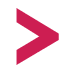
<style>
.page{position:relative;width:73px;height:73px;background:#ffffff}
.page>*{position:absolute;margin:0}
.t1{font:100px "Raleway-Bold";color:#cd1e52}
</style>
<div class="page">
<p class="t1" style="left:16px;top:8px;width:43px;height:57px">&gt;</p>
</div>
